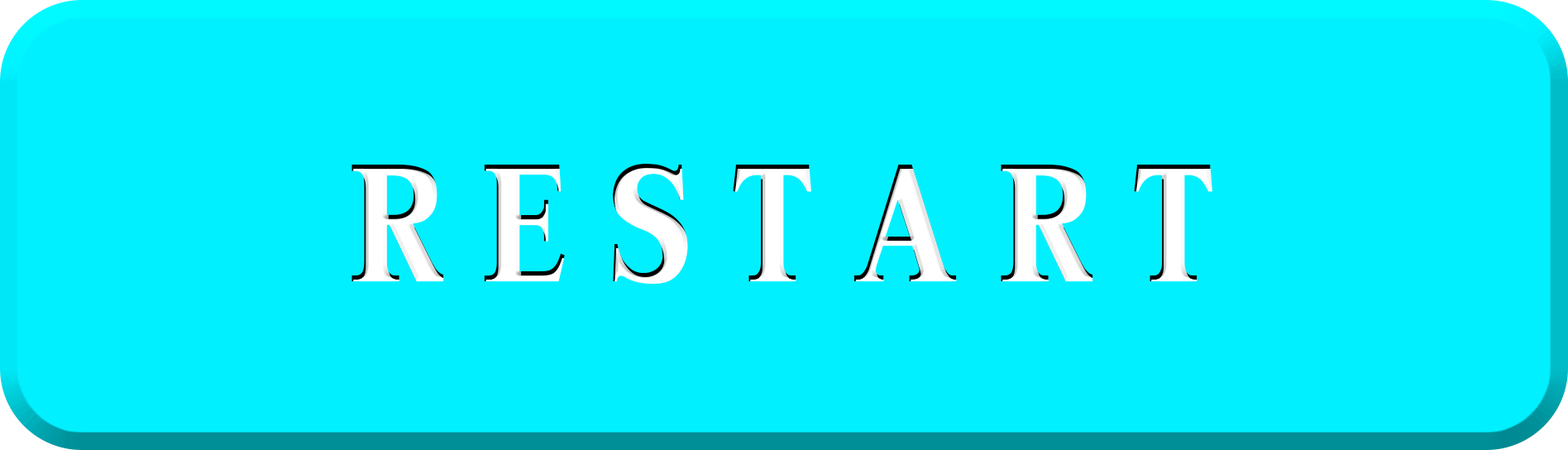
<style>
.page{position:relative;width:1568px;height:450px;background:#00f0ff}
.page>*{position:absolute;margin:0}
.t1{font:241.2px "KodchiangUPCBold";letter-spacing:0.16em;color:#ffffff}
</style>
<div class="page">
<p class="t1" style="left:351px;top:164px;width:861px;height:120px">RESTART</p>
</div>
